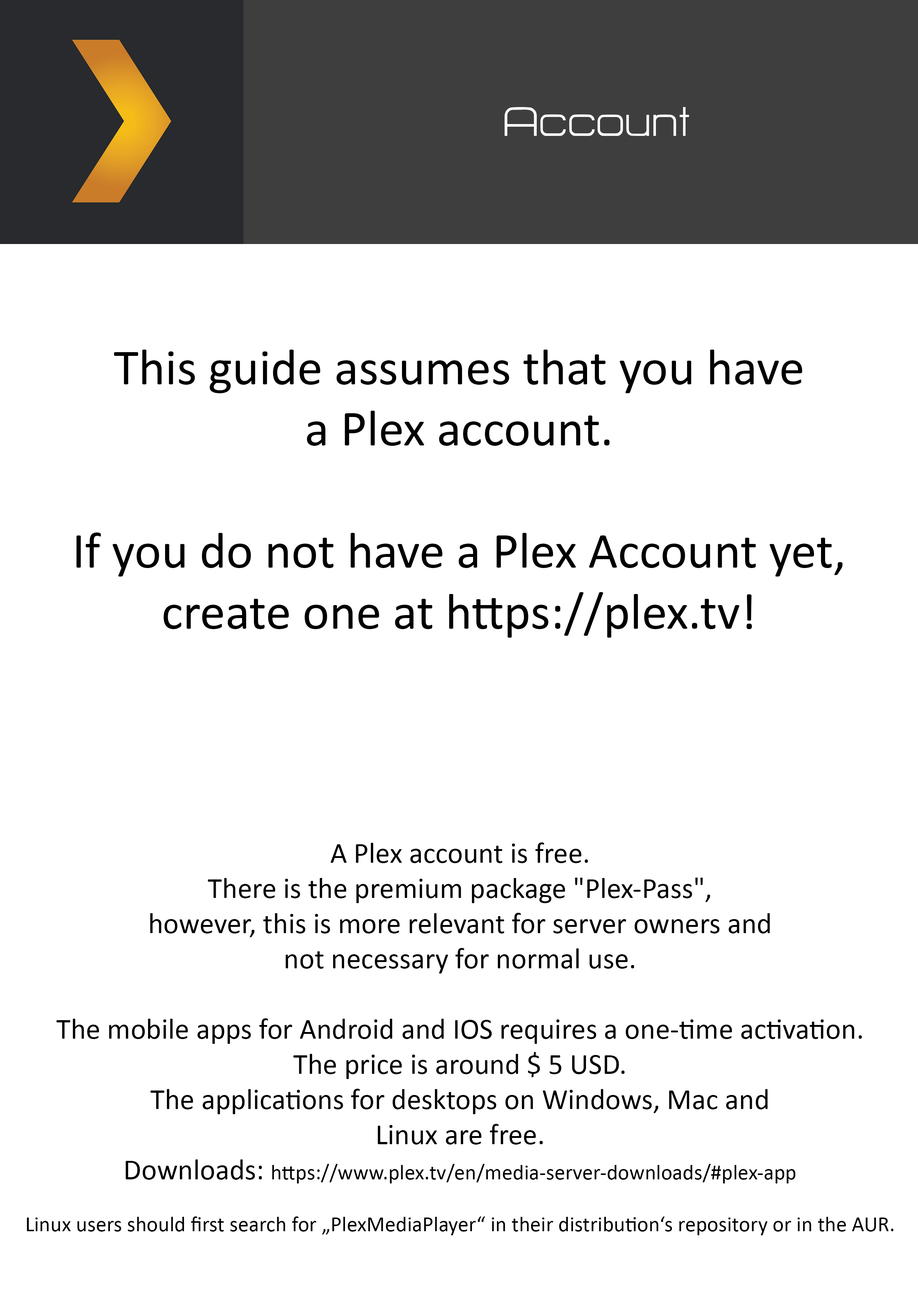
<style>
.page{position:relative;width:918px;height:1299px;background:#ffffff}
.page>*{position:absolute;margin:0}
.t1{font:50.9px "HURTMOLDPersonalUse-Regular";color:#ffffff}
.t2{font:50.9px "Calibri";color:#000000}
.t3{font:29.3px "Calibri";color:#000000}
.t4{font:21.6px "Calibri";color:#000000}
</style>
<div class="page">
<p class="t1" style="left:505px;top:107px;width:184px;height:29px">Account</p>
<p class="t2" style="left:76px;top:349px;width:767px;height:289px;text-align:center">This guide assumes that you have<br>a Plex account.<br><br>If you do not have a Plex Account yet,<br>create one at https://plex.tv!</p>
<p class="t3" style="left:27px;top:842px;width:867px;height:393px;text-align:center">A Plex account is free.<br>There is the premium package "Plex-Pass",<br>however, this is more relevant for server owners and<br>not necessary for normal use.<br><br>The mobile apps for Android and IOS requires a one-time activation.<br>The price is around $ 5 USD.<br>The applications for desktops on Windows, Mac and<br>Linux are free.<br>Downloads: <span class="t4">https://www.plex.tv/en/media-server-downloads/#plex-app<br><br>Linux users should first search for „PlexMediaPlayer“ in their distribution‘s repository or in the AUR.</span></p>
</div>
